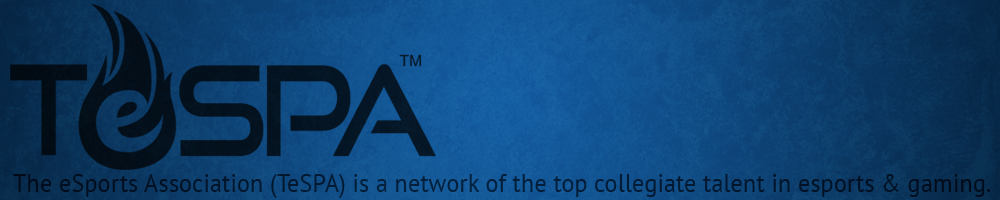
<style>
.page{position:relative;width:1000px;height:200px}
.page>*{position:absolute;margin:0}
.t1{font:24.7px "PTSans-Regular";color:#03162d}
</style>
<div class="page">
<p class="t1" style="left:13px;top:174px;width:978px;height:24px">The eSports Association (TeSPA) is a network of the top collegiate talent in esports &amp; gaming.</p>
</div>
